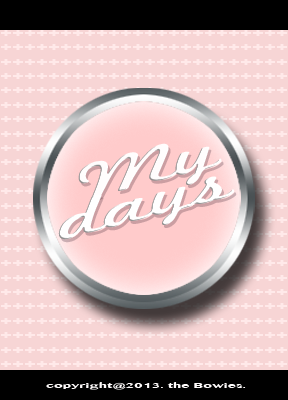
<style>
.page{position:relative;width:288px;height:400px;background:#f7d5d5}
.page>*{position:absolute;margin:0}
.t1{font:52.3px "MarketingScript";color:#fffcfc;scale:1.78 1}
.t2{font:52.3px "MarketingScript";color:#ffffff;scale:1.78 1}
.t3{font:7.2px "BanglaMN-Bold";color:#fffcfc;scale:1.88 1}
</style>
<div class="page">
<p class="t1" style="left:78px;top:143px;width:144px;height:55px;rotate:-15deg">My</p>
<p class="t2" style="left:58px;top:176px;width:177px;height:64px;rotate:-15deg">days</p>
<p class="t3" style="left:46px;top:382px;width:200px;height:8px">copyright@2013. the Bowies.</p>
</div>
